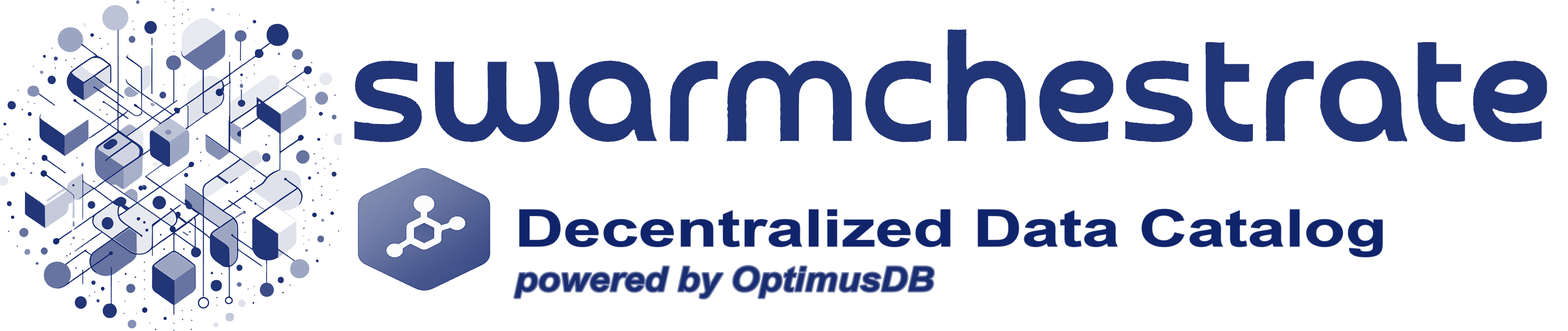
<style>
.page{position:relative;width:1568px;height:331px;background:#ffffff}
.page>*{position:absolute;margin:0}
.t1{font:50.9px "Arial-BoldMT";color:#001662;scale:1.33 1}
.t2{font:33.9px "ArialNarrow-BoldItalic";color:#1a2e72;scale:1.33 1}
</style>
<div class="page">
<p class="t1" style="left:520px;top:209px;width:863px;height:48px">Decentralized Data Catalog</p>
<p class="t2" style="left:514px;top:266px;width:420px;height:32px">powered by OptimusDB</p>
</div>
